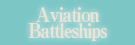
<style>
.page{position:relative;width:135px;height:45px;background:#7dc6c6}
.page>*{position:absolute;margin:0}
.t1{font:20px/16px "RyuminPro-ExBold";letter-spacing:-0.08em;color:#f1e6d8;scale:0.9 1}
</style>
<div class="page">
<p class="t1" style="left:28px;top:7px;width:79px;height:34px;text-align:center">Aviation<br>Battleships</p>
</div>
